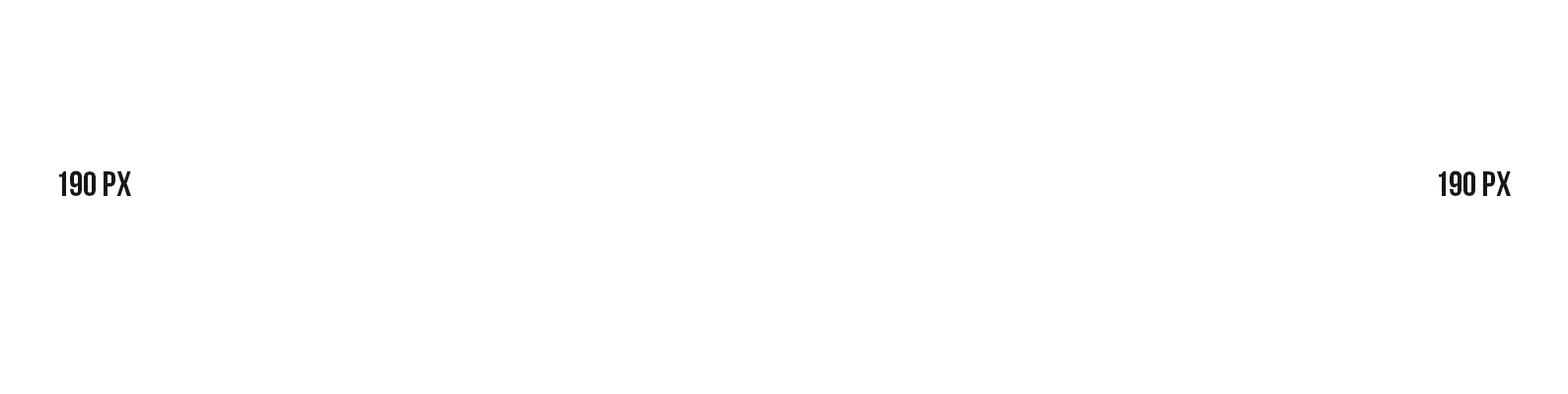
<style>
.page{position:relative;width:1568px;height:394px;background:#ffffff}
.page>*{position:absolute;margin:0}
.t1{font:35.5px "BebasNeueBold";color:#171717;text-transform:uppercase}
</style>
<div class="page">
<p class="t1" style="left:59px;top:171px;width:72px;height:25px">190 px</p>
<p class="t1" style="left:1439px;top:171px;width:72px;height:25px">190 px</p>
</div>
